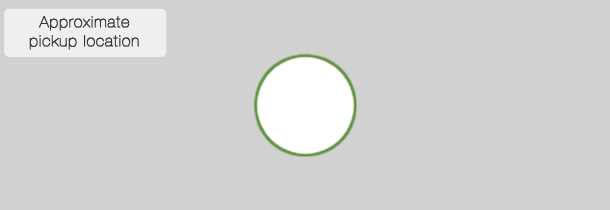
<style>
.page{position:relative;width:610px;height:210px;background:#d1d1d1}
.page>*{position:absolute;margin:0}
.t1{font:15.6px/18.4px "HelveticaNeue-UltraLight";letter-spacing:0.05em;color:#333333;font-weight:bold}
</style>
<div class="page">
<p class="t1" style="left:29px;top:16px;width:110px;height:34px;text-align:center">Approximate <br>pickup location</p>
</div>
